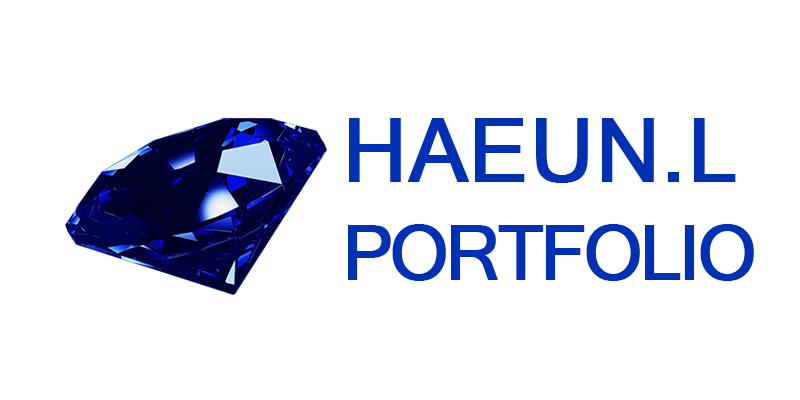
<style>
.page{position:relative;width:800px;height:400px;background:#ffffff}
.page>*{position:absolute;margin:0}
.t1{font:18px/108.3px "MicrosoftSansSerif";letter-spacing:-0.06em;color:#0031b5;font-weight:bold}
.t2{font:87.5px/108.3px "MicrosoftSansSerif";color:#0031b5;font-weight:bold}
</style>
<div class="page">
<p class="t1" style="left:348px;top:118px;width:406px;height:163px"><span class="t2">HAEUN.L<br></span>PORTFOLIO</p>
</div>
